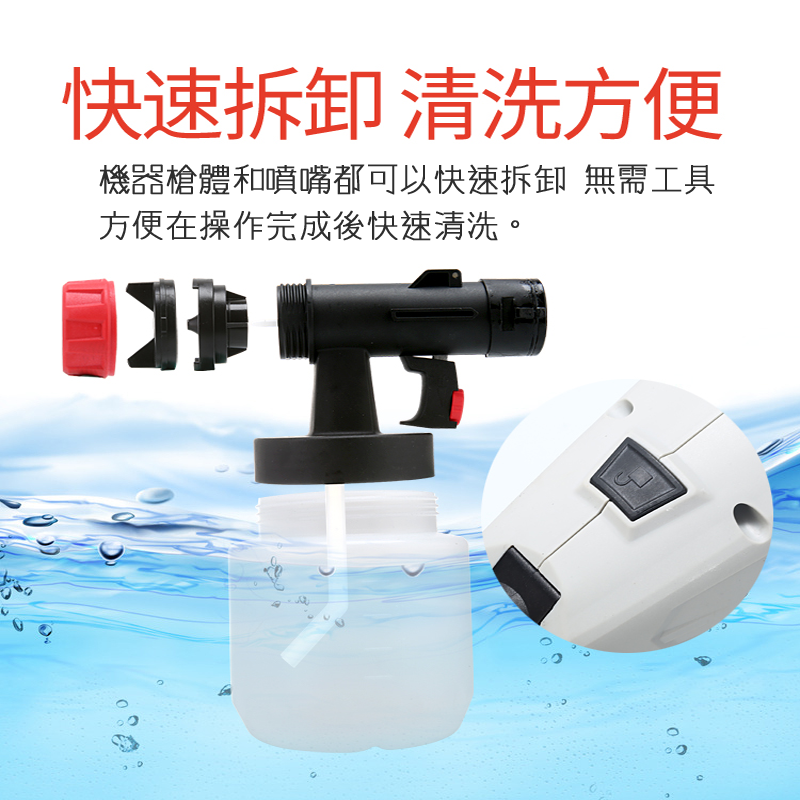
<style>
.page{position:relative;width:800px;height:800px;background:#ffffff}
.page>*{position:absolute;margin:0}
.t1{font:34.2px/45.7px "winman-tun33014";letter-spacing:-0.05em;color:#2d2d2d;font-weight:bold}
</style>
<div class="page">
<p class="t1" style="left:99px;top:164px;width:616px;height:77px">機器槍體和噴嘴都可以快速拆卸 無需工具<br>方便在操作完成後快速清洗。</p>
</div>
